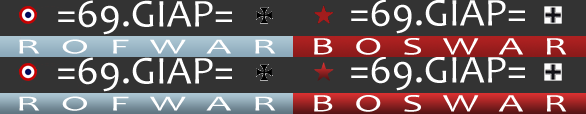
<style>
.page{position:relative;width:586px;height:114px;background:#333333}
.page>*{position:absolute;margin:0}
.t1{font:39.8px "Candara";color:#ffffff}
.t2{font:21.9px "Candara";letter-spacing:0.5em;color:#ffffff;scale:1.86 1}
.t3{font:25.6px "Candara";letter-spacing:0.5em;color:#ffffff;scale:1.57 1}
</style>
<div class="page">
<p class="t1" style="left:58px;top:0px;width:174px;height:35px">=69.GIAP=</p>
<p class="t1" style="left:351px;top:0px;width:174px;height:34px">=69.GIAP=</p>
<p class="t2" style="left:19px;top:39px;width:257px;height:15px">ROFWAR</p>
<p class="t3" style="left:314px;top:38px;width:253px;height:17px">BOSWAR</p>
<p class="t1" style="left:58px;top:57px;width:174px;height:35px">=69.GIAP=</p>
<p class="t1" style="left:351px;top:56px;width:174px;height:35px">=69.GIAP=</p>
<p class="t2" style="left:19px;top:96px;width:257px;height:15px">ROFWAR</p>
<p class="t3" style="left:314px;top:95px;width:253px;height:17px">BOSWAR</p>
</div>
